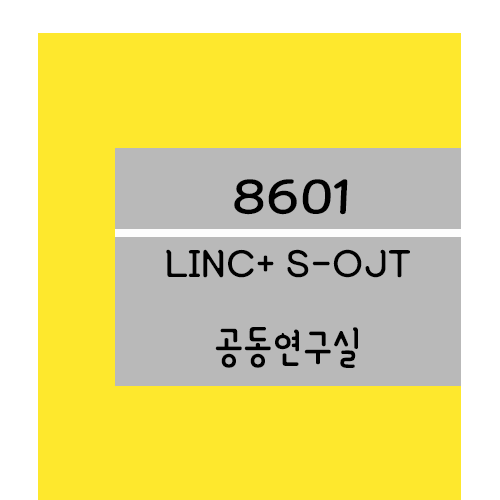
<style>
.page{position:relative;width:500px;height:500px;background:#fee82d}
.page>*{position:absolute;margin:0}
.t1{font:61.2px "YanoljaYacheR";color:#000000;scale:1.18 1}
.t2{font:48px "YanoljaYacheR";color:#000000}
</style>
<div class="page">
<p class="t1" style="left:234px;top:179px;width:114px;height:36px">8601</p>
<p class="t2" style="left:166px;top:249px;width:244px;height:119px;text-align:center">LINC+ S-OJT<br>공동연구실</p>
</div>
